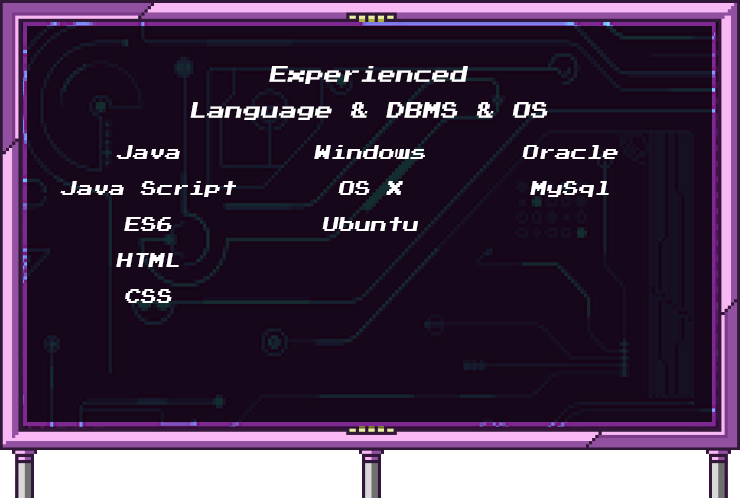
<style>
.page{position:relative;width:740px;height:498px;background:#17071a}
.page>*{position:absolute;margin:0}
.t1{font:18px/36px "PressStart2P";color:#ffffff;font-style:italic}
.t2{font:16px/36px "PressStart2P";color:#ffffff;font-style:italic}
</style>
<div class="page">
<p class="t1" style="left:190px;top:66px;width:358px;height:54px;text-align:center">Experienced<br>Language &amp; DBMS &amp; OS</p>
<p class="t2" style="left:60px;top:145px;width:176px;height:158px;text-align:center">Java<br>Java Script<br>ES6<br>HTML<br>CSS</p>
<p class="t2" style="left:314px;top:145px;width:111px;height:86px;text-align:center">Windows<br>OS X<br>Ubuntu</p>
<p class="t2" style="left:522px;top:145px;width:96px;height:52px;text-align:center">Oracle<br>MySql</p>
</div>
